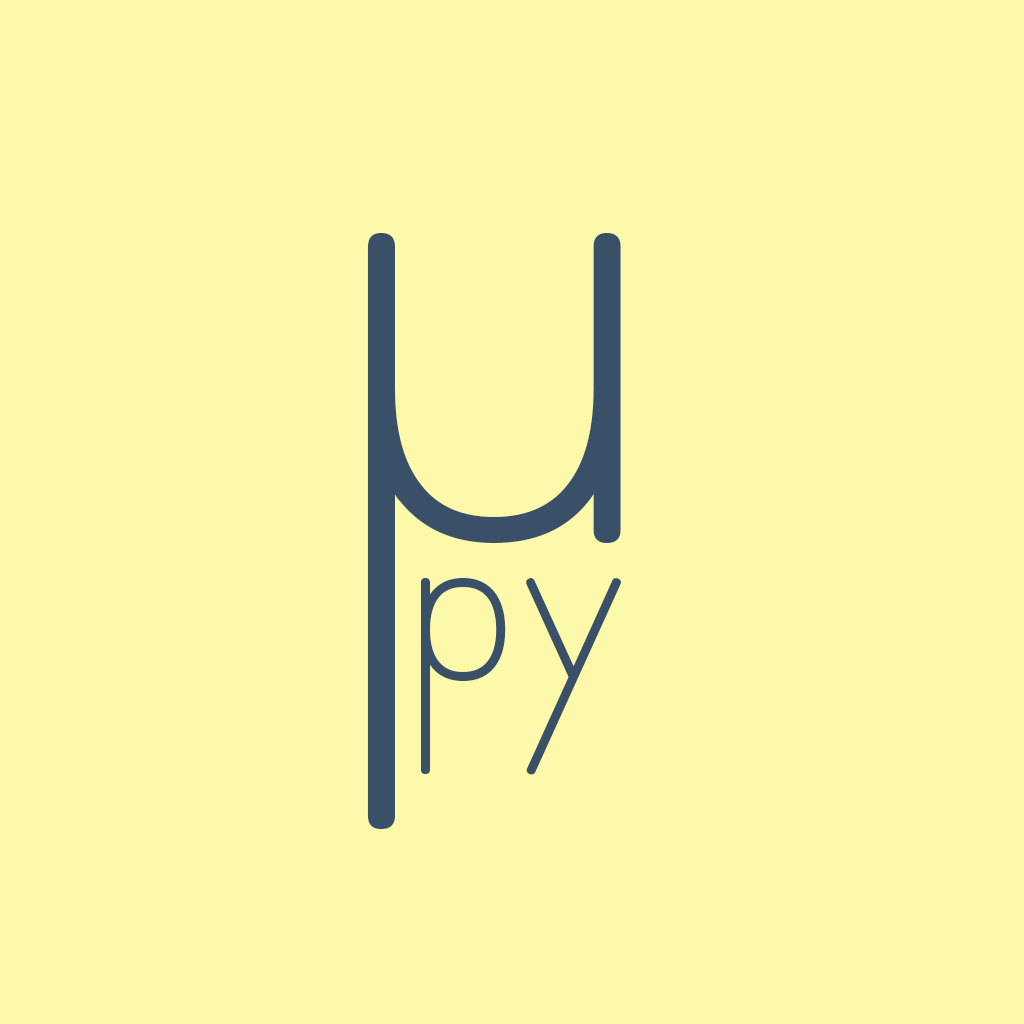
<style>
.page{position:relative;width:1024px;height:1024px;background:#fcfaaa}
.page>*{position:absolute;margin:0}
.t1{font:1200px "SimplePrint-Regular";color:#3a5069}
.t2{font:400px "SimplePrint-Regular";color:#3a5069}
</style>
<div class="page">
<p class="t1" style="left:367px;top:233px;width:254px;height:596px">μ</p>
<p class="t2" style="left:420px;top:578px;width:201px;height:197px">py</p>
</div>
